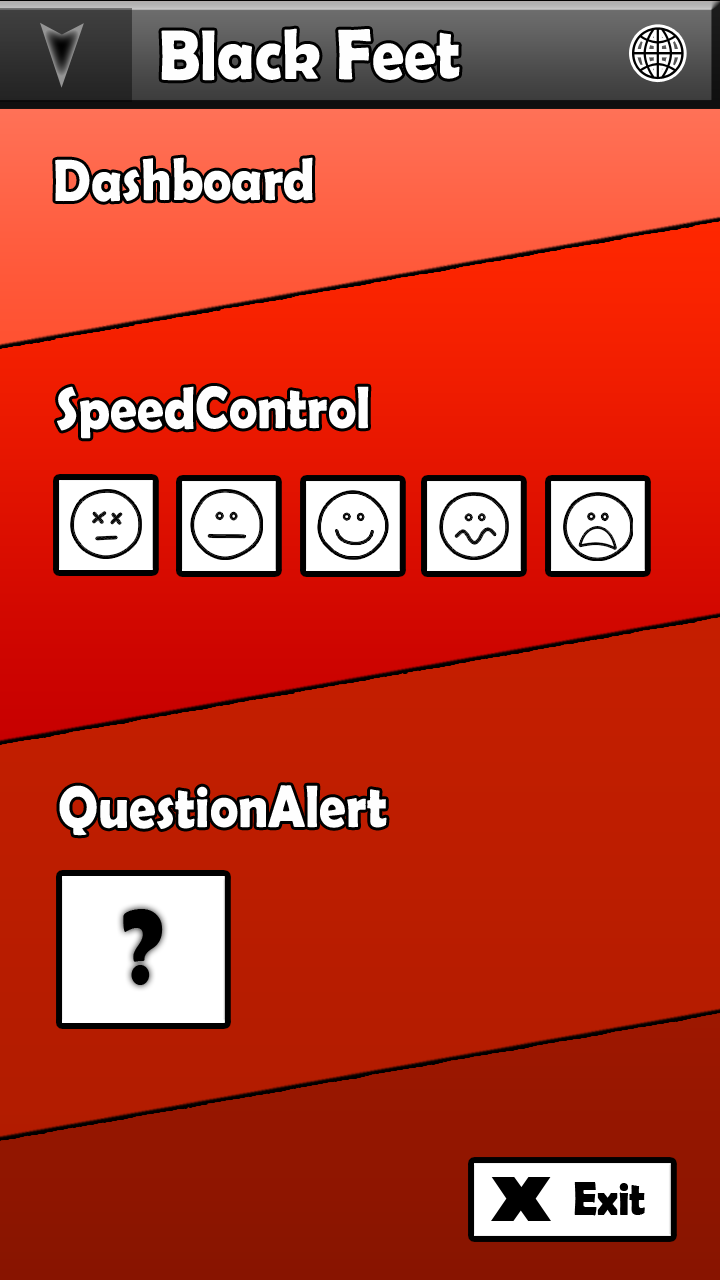
<style>
.page{position:relative;width:720px;height:1280px}
.page>*{position:absolute;margin:0}
.t1{font:72px "BerlinSansFBDemi-Bold";color:#fefefe;scale:0.89 1}
.t2{font:60px "BerlinSansFBDemi-Bold";color:#fefefe;scale:0.89 1}
.t3{font:110px "BerlinSansFBDemi-Bold";color:#000000;scale:0.89 1}
.t4{font:48px "BerlinSansFBDemi-Bold";color:#000000;scale:0.89 1}
</style>
<div class="page">
<p class="t1" style="left:161px;top:28px;width:299px;height:53px">Black Feet</p>
<p class="t2" style="left:55px;top:157px;width:258px;height:45px">Dashboard</p>
<p class="t2" style="left:57px;top:386px;width:312px;height:53px">SpeedControl</p>
<p class="t2" style="left:59px;top:785px;width:328px;height:51px">QuestionAlert</p>
<p class="t3" style="left:123px;top:909px;width:40px;height:76px">?</p>
<p class="t4" style="left:574px;top:1182px;width:71px;height:34px">Exit</p>
</div>
